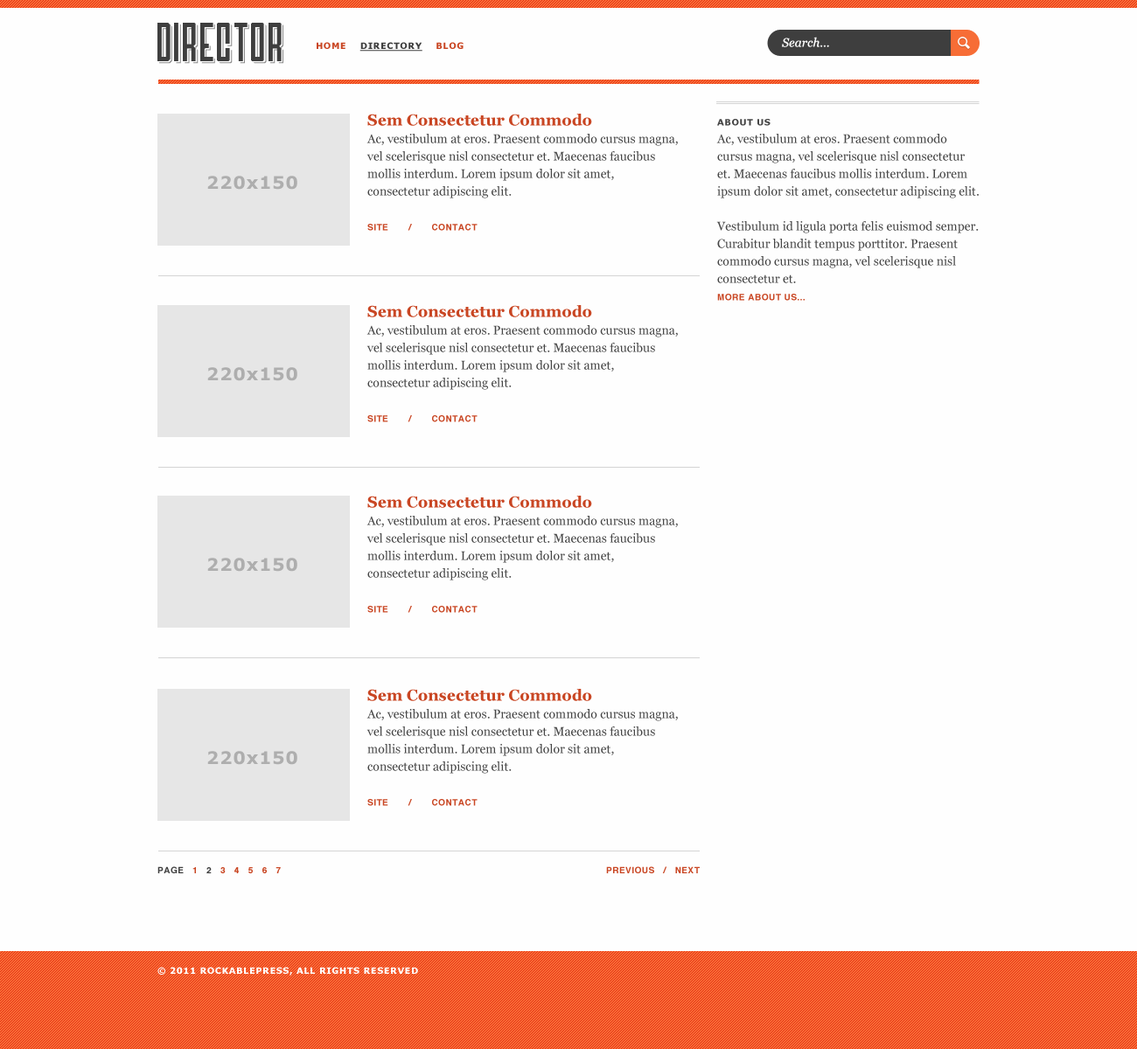
<style>
.page{position:relative;width:1137px;height:1049px;background:#fefefe}
.page>*{position:absolute;margin:0}
.t1{font:38.4px "Airship27";color:#3e3e3e}
.t2{font:38.4px "Airship27"}
.t3{font:8.7px "Verdana-Bold";letter-spacing:0.05em;color:#3e3e3e;text-decoration:underline}
.t4{font:8.7px "Verdana-Bold";letter-spacing:0.05em;color:#c94623}
.t5{font:12.2px "Georgia-Italic";color:#fefefe}
.t6{font:12.2px/17.5px "Georgia";color:#464646}
.t7{font:15.7px/16.6px "Georgia-Bold";color:#c94623}
.t8{font:8.7px/17.5px "Helvetica-Bold";letter-spacing:0.05em;color:#c94623}
.t9{font:8.7px/16.6px "Verdana-Bold";letter-spacing:0.05em;color:#464646}
.t10{font:17.5px "Verdana-Bold";letter-spacing:0.05em;color:#aeaeae}
.t11{font:8.7px "Helvetica-Bold";letter-spacing:0.05em;color:#c94623}
.t12{font:8.7px "Helvetica-Bold";letter-spacing:0.05em;color:#3e3e3e}
.t13{font:8.7px "Verdana-Bold";letter-spacing:0.05em;color:#ffffff}
</style>
<div class="page">
<p class="t1" style="left:157px;top:23px;width:125px;height:38px">DirectOr</p>
<p class="t2" style="left:158px;top:24px;width:124px;height:39px">DirectOr</p>
<p class="t3" style="left:316px;top:42px;width:147px;height:10px"><span class="t4">HOME    </span>DIRECTORY<span class="t4">    BLOG</span></p>
<p class="t5" style="left:782px;top:37px;width:47px;height:10px">Search...</p>
<p class="t6" style="left:366px;top:114px;width:312px;height:117px"><span class="t7">Sem Consectetur Commodo<br></span>Ac, vestibulum at eros. Praesent commodo cursus magna, vel scelerisque nisl consectetur et. Maecenas faucibus mollis interdum. Lorem ipsum dolor sit amet, consectetur adipiscing elit.<br><br><span class="t8">SITE       /       CONTACT</span></p>
<p class="t6" style="left:716px;top:119px;width:262px;height:182px"><span class="t9">ABOUT US<br></span>Ac, vestibulum at eros. Praesent commodo cursus magna, vel scelerisque nisl consectetur et. Maecenas faucibus mollis interdum. Lorem ipsum dolor sit amet, consectetur adipiscing elit.<br><br>Vestibulum id ligula porta felis euismod semper. Curabitur blandit tempus porttitor. Praesent commodo cursus magna, vel scelerisque nisl consectetur et.<br><span class="t8">MORE ABOUT US...</span></p>
<p class="t10" style="left:207px;top:176px;width:90px;height:14px">220x150</p>
<p class="t6" style="left:366px;top:305px;width:312px;height:117px"><span class="t7">Sem Consectetur Commodo<br></span>Ac, vestibulum at eros. Praesent commodo cursus magna, vel scelerisque nisl consectetur et. Maecenas faucibus mollis interdum. Lorem ipsum dolor sit amet, consectetur adipiscing elit.<br><br><span class="t8">SITE       /       CONTACT</span></p>
<p class="t10" style="left:207px;top:367px;width:90px;height:14px">220x150</p>
<p class="t6" style="left:366px;top:496px;width:312px;height:117px"><span class="t7">Sem Consectetur Commodo<br></span>Ac, vestibulum at eros. Praesent commodo cursus magna, vel scelerisque nisl consectetur et. Maecenas faucibus mollis interdum. Lorem ipsum dolor sit amet, consectetur adipiscing elit.<br><br><span class="t8">SITE       /       CONTACT</span></p>
<p class="t10" style="left:207px;top:558px;width:90px;height:14px">220x150</p>
<p class="t6" style="left:366px;top:689px;width:312px;height:117px"><span class="t7">Sem Consectetur Commodo<br></span>Ac, vestibulum at eros. Praesent commodo cursus magna, vel scelerisque nisl consectetur et. Maecenas faucibus mollis interdum. Lorem ipsum dolor sit amet, consectetur adipiscing elit.<br><br><span class="t8">SITE       /       CONTACT</span></p>
<p class="t10" style="left:207px;top:751px;width:90px;height:14px">220x150</p>
<p class="t11" style="left:157px;top:866px;width:124px;height:7px"><span class="t12">PAGE   </span>1   <span class="t12">2 </span>  3   4   5   6   7</p>
<p class="t11" style="left:606px;top:866px;width:93px;height:7px">PREVIOUS   /   NEXT</p>
<p class="t13" style="left:157px;top:967px;width:261px;height:9px">© 2011 ROCKABLEPRESS, ALL RIGHTS RESERVED</p>
</div>
